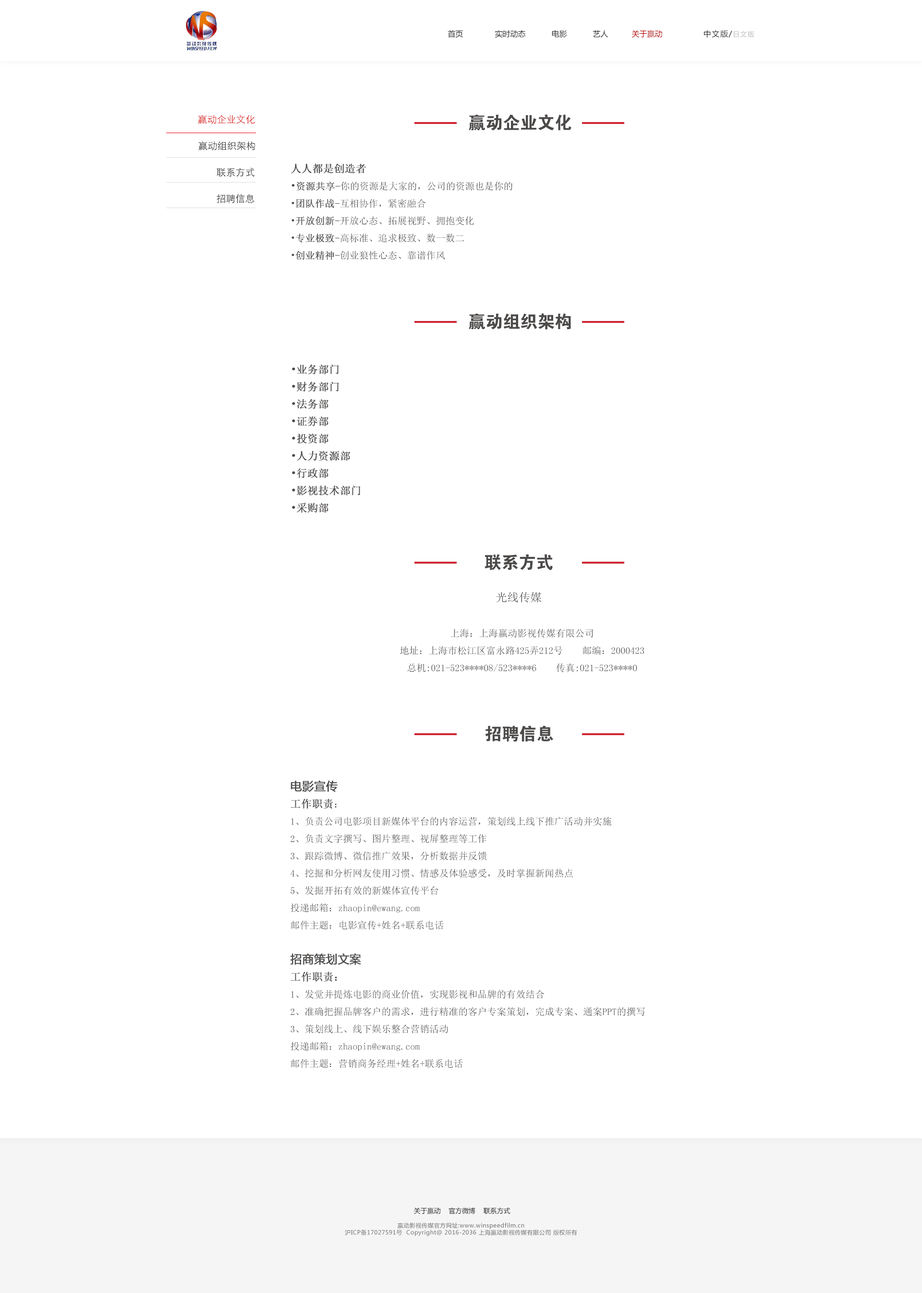
<style>
.page{position:relative;width:922px;height:1293px;background:#ffffff}
.page>*{position:absolute;margin:0}
.t1{font:7.7px "MicrosoftYaHei";color:#222222}
.t2{font:7.7px "MicrosoftYaHei";color:#b50101}
.t3{font:7.7px "MicrosoftYaHei";letter-spacing:0.1em;color:#222222}
.t4{font:6.7px "MicrosoftYaHei";letter-spacing:0.1em;color:#c0bdbd}
.t5{font:9.6px "STXihei";color:#d70707}
.t6{font:17.3px "FZDHTJW--GB1-0";color:#4c4a49}
.t7{font:9.6px "STXihei";color:#222222}
.t8{font:9.6px/17.3px "SimSun";color:#4c4a49}
.t9{font:10.6px/17.3px "SimSun";color:#4c4a49;font-weight:bold}
.t10{font:10.6px/17.3px "SimSun";color:#4c4a49}
.t11{font:9.6px/17.3px "SimSun";color:#4c4a49;font-weight:bold}
.t12{font:11.5px "SimSun";color:#4c4a49}
.t13{font:11.5px/17.3px "MicrosoftYaHei";color:#4c4a49;font-weight:bold}
.t14{font:5.8px "MicrosoftYaHei";letter-spacing:0.05em;color:#747474}
.t15{font:6.7px/14.4px "MicrosoftYaHei";color:#222222}
.t16{font:5.8px/14.4px "MicrosoftYaHei";letter-spacing:0.05em;color:#747474}
</style>
<div class="page">
<p class="t1" style="left:448px;top:30px;width:307px;height:8px">首页              实时动态           电影           艺人          <span class="t2">关于赢动                  </span><span class="t3">中文版/</span><span class="t4">日文版</span></p>
<p class="t5" style="left:198px;top:115px;width:57px;height:9px">赢动企业文化</p>
<p class="t6" style="left:469px;top:114px;width:103px;height:17px">赢动企业文化</p>
<p class="t7" style="left:198px;top:141px;width:57px;height:9px">赢动组织架构</p>
<p class="t7" style="left:217px;top:168px;width:38px;height:9px">联系方式</p>
<p class="t8" style="left:291px;top:163px;width:222px;height:97px"><span class="t9">人人都是创造者<br></span><span class="t10">•</span><span class="t11">资源共享-</span>你的资源是大家的，公司的资源也是你的<br>•<span class="t11">团队作战-</span>互相协作，紧密融合<br>•<span class="t11">开放创新-</span>开放心态、拓展视野、拥抱变化<br>•<span class="t11">专业极致-</span>高标准、追求极致、数一数二<br>•<span class="t11">创业精神-</span>创业狼性心态、靠谱作风</p>
<p class="t7" style="left:217px;top:194px;width:38px;height:9px">招聘信息</p>
<p class="t6" style="left:469px;top:313px;width:102px;height:17px">赢动组织架构</p>
<p class="t9" style="left:292px;top:364px;width:69px;height:149px">•业务部门<br>•财务部门<br>•法务部<br>•证券部<br>•投资部<br>•人力资源部<br>•行政部<br>•影视技术部门<br>•采购部</p>
<p class="t6" style="left:485px;top:554px;width:68px;height:16px">联系方式</p>
<p class="t12" style="left:496px;top:591px;width:46px;height:11px">光线传媒</p>
<p class="t8" style="left:400px;top:628px;width:244px;height:44px;text-align:center">上海：上海赢动影视传媒有限公司<br>地址：上海市松江区富永路425弄212号    邮编：2000423<br>总机:021-523****08/523****6    传真:021-523****0</p>
<p class="t6" style="left:485px;top:725px;width:68px;height:17px">招聘信息</p>
<p class="t8" style="left:290px;top:780px;width:355px;height:288px"><span class="t13">电影宣传<br></span><span class="t9">工作职责</span><span class="t10">：<br></span>1、负责公司电影项目新媒体平台的内容运营，策划线上线下推广活动并实施<br>2、负责文字撰写、图片整理、视屏整理等工作<br>3、跟踪微博、微信推广效果，分析数据并反馈<br>4、挖掘和分析网友使用习惯、情感及体验感受，及时掌握新闻热点<br>5、发掘开拓有效的新媒体宣传平台<br>投递邮箱：zhaopin@ewang.com<br>邮件主题：电影宣传+姓名+联系电话<br><br><span class="t13">招商策划文案<br></span><span class="t9">工作职责：<br></span>1、发觉并提炼电影的商业价值，实现影视和品牌的有效结合<br>2、准确把握品牌客户的需求，进行精准的客户专案策划，完成专案、通案PPT的撰写<br>3、策划线上、线下娱乐整合营销活动<br>投递邮箱：zhaopin@ewang.com<br>邮件主题：营销商务经理+姓名+联系电话</p>
<p class="t14" style="left:345px;top:1207px;width:232px;height:29px;text-align:center"><span class="t15">     关于赢动    官方微博    联系方式    <br></span><span class="t16">赢动影视传媒官方网址:www.winspeedfilm.cn<br></span>沪ICP备17027591号  Copyright@ 2016-2036 上海赢动影视传媒有限公司 版权所有</p>
</div>
